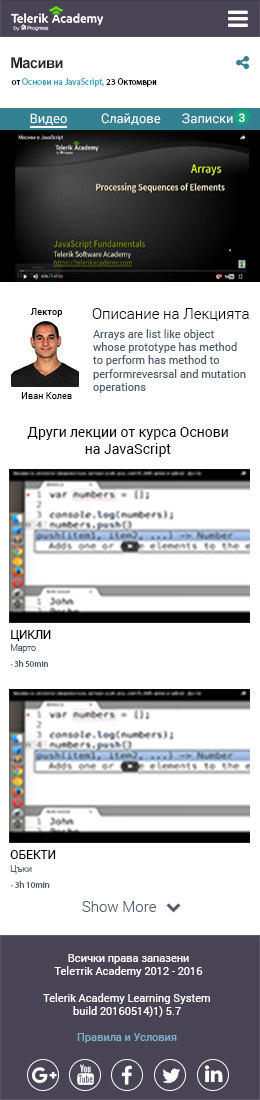
<style>
.page{position:relative;width:260px;height:1100px;background:#ffffff}
.page>*{position:absolute;margin:0}
.t1{font:15px "Arial-BoldMT";letter-spacing:-0.05em;color:#21242c}
.t2{font:9px "MyriadPro-Regular";color:#43a4b9}
.t3{font:9px "MyriadPro-Regular";color:#000000}
.t4{font:13px "Roboto-Regular";color:#ffffff}
.t5{font:12px "Roboto-Medium";color:#ffffff;text-transform:uppercase}
.t6{font:9px "Roboto-Medium";color:#000000}
.t7{font:15px "Roboto-Light";color:#000000}
.t8{font:11px "Roboto-Regular";color:#4f5d6c}
.t9{font:9px "Roboto-Regular";color:#000000}
.t10{font:14px "Roboto-Regular";color:#000000}
.t11{font:11.6px "Roboto-Regular";color:#000000;text-transform:uppercase}
.t12{font:8.7px "Roboto-Light";color:#4f5d6c}
.t13{font:8.7px "MyriadPro-Regular";color:#4f5d6c}
.t14{font:11.9px "Roboto-Regular";color:#000000;text-transform:uppercase}
.t15{font:9px "Roboto-Light";color:#4f5d6c}
.t16{font:9px "MyriadPro-Regular";color:#4f5d6c}
.t17{font:15px "Roboto-Light";color:#4f5d6c}
.t18{font:11px "Roboto-Regular";color:#ffffff}
.t19{font:11px "Roboto-Regular";color:#7cb0cc}
</style>
<div class="page">
<p class="t1" style="left:11px;top:57px;width:52px;height:12px">Масиви</p>
<p class="t2" style="left:11px;top:78px;width:146px;height:9px"><span class="t3">от </span>Основи на JavaScript,<span class="t3"> 23 Октомври</span></p>
<p class="t4" style="left:30px;top:113px;width:37px;height:12px">Видео</p>
<p class="t4" style="left:101px;top:113px;width:60px;height:12px">Слайдове</p>
<p class="t4" style="left:182px;top:113px;width:51px;height:11px">Записки</p>
<p class="t5" style="left:239px;top:113px;width:6px;height:9px">3</p>
<p class="t6" style="left:30px;top:308px;width:33px;height:9px">Лектор</p>
<p class="t7" style="left:92px;top:308px;width:157px;height:13px">Описание на Лекцията</p>
<p class="t8" style="left:93px;top:329px;width:153px;height:64px;text-align:right">Arrays are list like object<br>whose prototype has method<br>to perform has method to<br>performrevesrsal and mutation<br>operations</p>
<p class="t9" style="left:21px;top:392px;width:51px;height:7px">Иван Колев</p>
<p class="t10" style="left:27px;top:427px;width:201px;height:30px;text-align:center">Други лекции от курса Основи<br>на JavaScript</p>
<p class="t11" style="left:11px;top:630px;width:40px;height:11px">Цикли</p>
<p class="t12" style="left:11px;top:644px;width:25px;height:9px">Марто</p>
<p class="t13" style="left:11px;top:660px;width:37px;height:7px">3h 50min ∙</p>
<p class="t14" style="left:10px;top:850px;width:46px;height:9px">Обекти</p>
<p class="t15" style="left:10px;top:865px;width:22px;height:9px">Цъки</p>
<p class="t16" style="left:11px;top:881px;width:39px;height:7px">3h 10min ∙</p>
<p class="t17" style="left:82px;top:901px;width:74px;height:11px">Show More</p>
<p class="t18" style="left:54px;top:954px;width:149px;height:23px;text-align:center">Всички права запазени<br>Teleтrik Academy 2012 - 2016</p>
<p class="t18" style="left:43px;top:993px;width:167px;height:24px;text-align:center">Telerik Academy Learning System<br>5.7 (build 20160514)1</p>
<p class="t19" style="left:77px;top:1033px;width:100px;height:10px">Правила и Условия</p>
</div>
